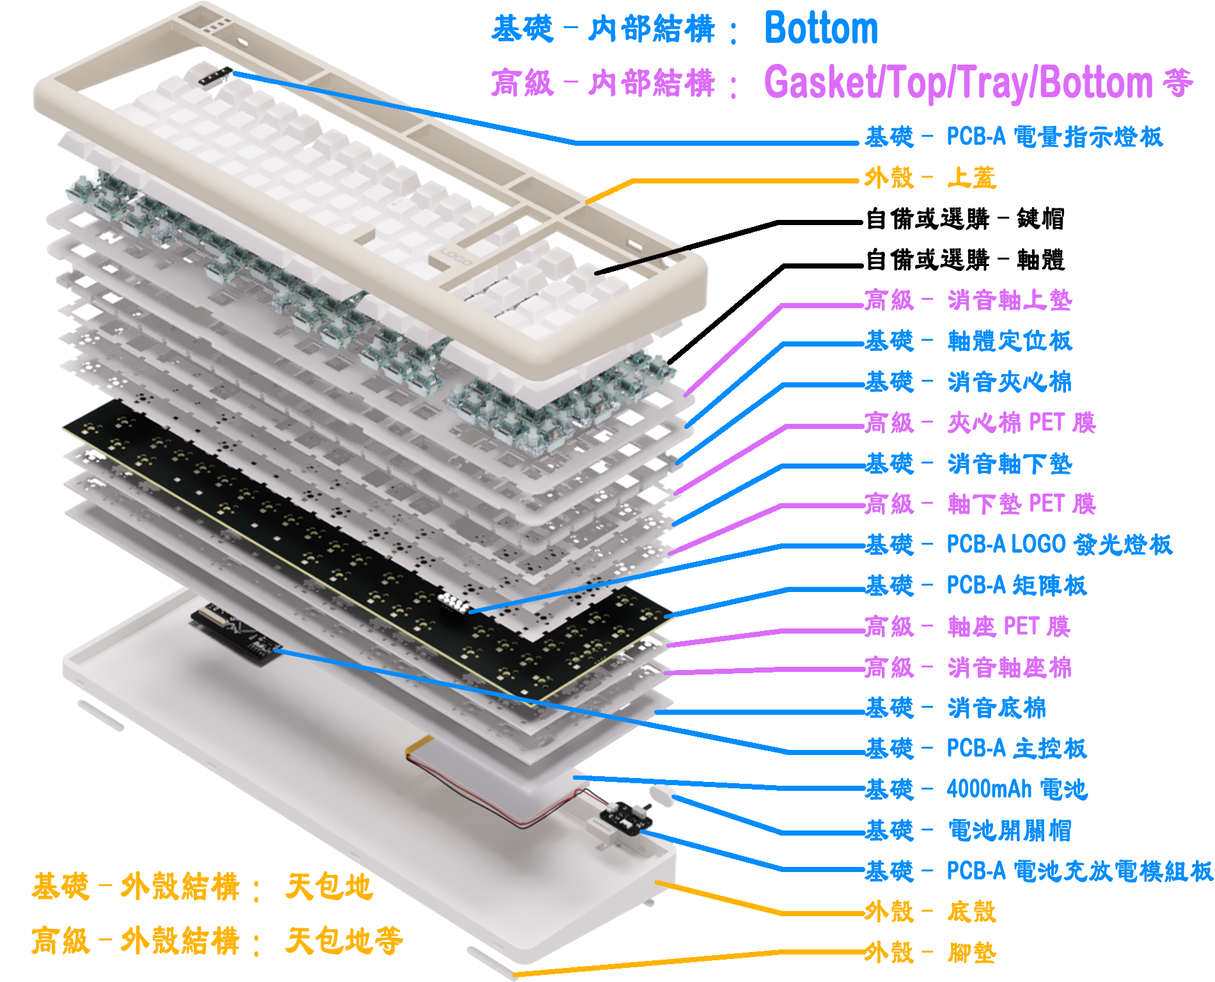
<style>
.page{position:relative;width:1215px;height:982px;background:#ffffff}
.page>*{position:absolute;margin:0}
.t1{font:44.7px/54.3px "ArialRoundedMTBold";color:#dc6cfb;font-weight:bold;scale:0.7 1}
.t2{font:44.7px/54.3px "LiSu";color:#008cff;font-weight:bold;scale:0.7 1}
.t3{font:44.7px/54.3px "ArialRoundedMTBold";color:#008cff;font-weight:bold;scale:0.7 1}
.t4{font:44.7px/54.3px "LiSu";color:#dc6cfb;font-weight:bold;scale:0.7 1}
.t5{font:35.2px/40.8px "LiSu";color:#008cff;font-weight:bold;scale:0.7 1}
.t6{font:25.6px/40.8px "ArialRoundedMTBold";color:#008cff;font-weight:bold;scale:0.7 1}
.t7{font:35.2px/40.8px "LiSu";color:#ffb300;font-weight:bold;scale:0.7 1}
.t8{font:35.2px/40.8px "LiSu";color:#000000;font-weight:bold;scale:0.7 1}
.t9{font:35.2px/40.8px "LiSu";color:#dc6cfb;font-weight:bold;scale:0.7 1}
.t10{font:25.6px/40.8px "ArialRoundedMTBold";color:#dc6cfb;font-weight:bold;scale:0.7 1}
.t11{font:44.7px/54.3px "LiSu";color:#ffb300;font-weight:bold;scale:0.65 1}
</style>
<div class="page">
<p class="t1" style="left:491px;top:10px;width:702px;height:96px"><span class="t2">基礎-内部結構：</span><span class="t3">Bottom<br></span><span class="t4">高級-内部結構：</span>Gasket/Top/Tray/Bottom<span class="t4">等</span></p>
<p class="t5" style="left:864px;top:125px;width:350px;height:839px">基礎- <span class="t6">PCB-A</span>電量指示燈板<br><span class="t7">外殼- 上蓋<br></span><span class="t8">自備或選購-鍵帽<br>自備或選購-軸體<br></span><span class="t9">高級- 消音軸上墊<br></span>基礎- 軸體定位板<br>基礎- 消音夾心棉<br><span class="t9">高級- 夾心棉</span><span class="t10">PET</span><span class="t9">膜<br></span>基礎- 消音軸下墊<br><span class="t9">高級- 軸下墊</span><span class="t10">PET</span><span class="t9">膜<br></span>基礎- <span class="t6">PCB-A LOGO</span>發光燈板<br>基礎- <span class="t6">PCB-A</span>矩陣板<br><span class="t9">高級- 軸座</span><span class="t10">PET</span><span class="t9">膜<br>高級- 消音軸座棉<br></span>基礎- 消音底棉<br>基礎- <span class="t6">PCB-A</span>主控板<br>基礎- <span class="t6">4000mAh</span>電池<br>基礎- 電池開關帽<br>基礎- <span class="t6">PCB-A</span>電池充放電模組板<br><span class="t7">外殼- 底殼<br>外殼- 腳墊</span></p>
<p class="t11" style="left:31px;top:871px;width:372px;height:86px">基礎-外殼結構：天包地<br>高級-外殼結構：天包地等</p>
</div>
